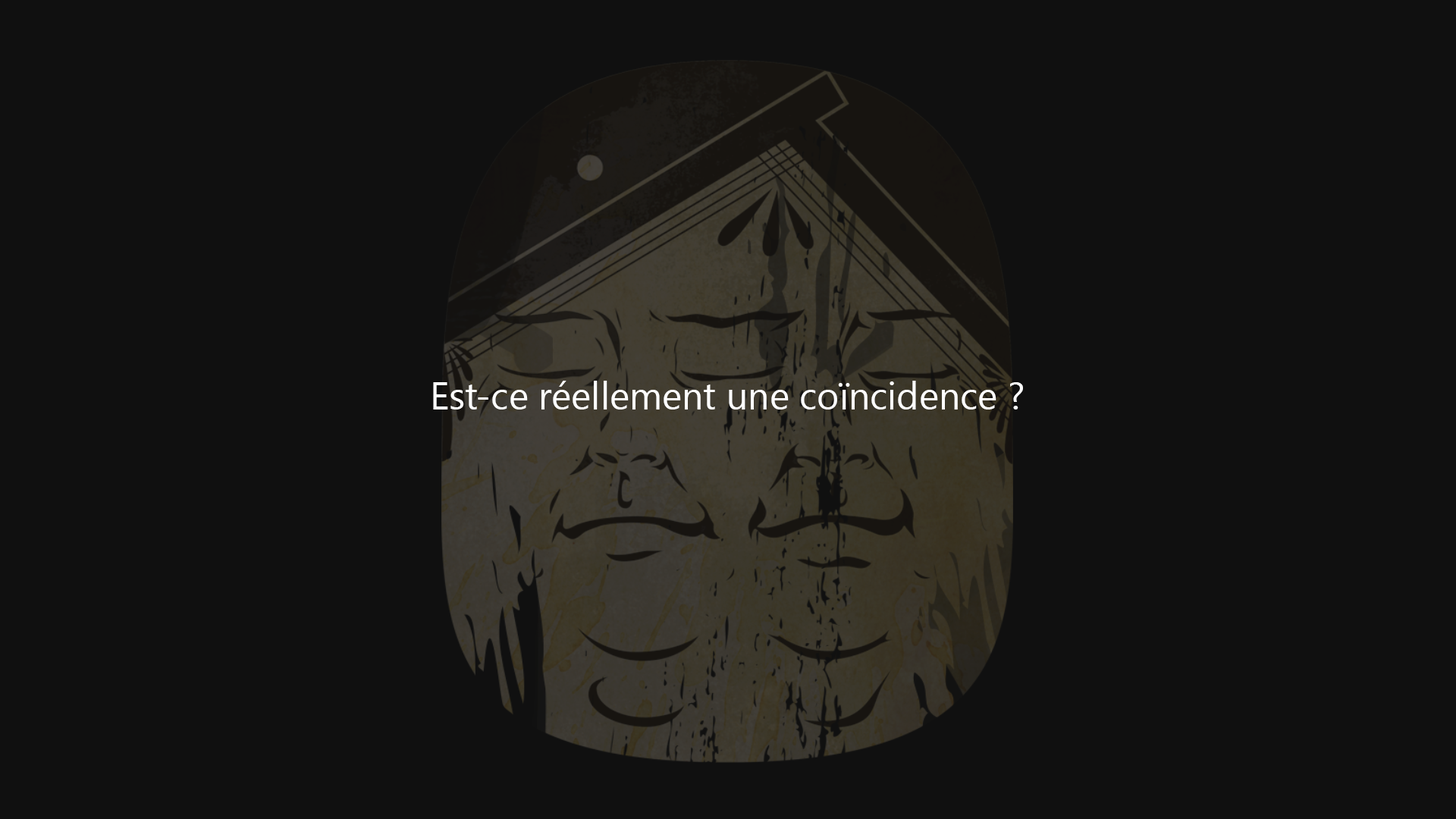
<style>
.page{position:relative;width:1456px;height:819px;background:#101010}
.page>*{position:absolute;margin:0}
.t1{font:37.9px "SegoeUIHistoric";color:#ffffff}
</style>
<div class="page">
<p class="t1" style="left:433px;top:381px;width:590px;height:28px">Est-ce réellement une coïncidence ?</p>
</div>
